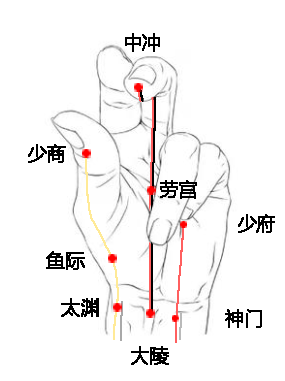
<style>
.page{position:relative;width:285px;height:381px;background:#ffffff}
.page>*{position:absolute;margin:0}
.t1{font:18.7px "MicrosoftYaHei";color:#000000;font-weight:bold}
</style>
<div class="page">
<p class="t1" style="left:125px;top:33px;width:35px;height:19px">中冲</p>
<p class="t1" style="left:28px;top:144px;width:38px;height:19px">少商</p>
<p class="t1" style="left:160px;top:180px;width:37px;height:19px">劳宫</p>
<p class="t1" style="left:238px;top:214px;width:37px;height:19px">少府</p>
<p class="t1" style="left:46px;top:251px;width:39px;height:19px">鱼际</p>
<p class="t1" style="left:61px;top:298px;width:38px;height:19px">太渊</p>
<p class="t1" style="left:225px;top:309px;width:37px;height:19px">神门</p>
<p class="t1" style="left:131px;top:346px;width:38px;height:19px">大陵</p>
</div>
